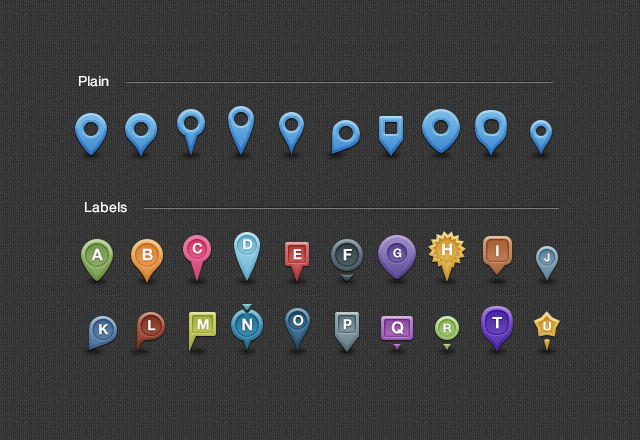
<style>
.page{position:relative;width:640px;height:440px;background:#303030}
.page>*{position:absolute;margin:0}
.t1{font:14px "HelveticaNeue-Medium";color:#ffffff}
.t2{font:14px "HelveticaNeue-Bold";color:#ffffff}
.t3{font:16px "HelveticaNeue-Bold";color:#ffffff}
.t4{font:15px "HelveticaNeue-Bold";color:#ffffff}
.t5{font:12px "HelveticaNeue-Bold";color:#ffffff}
.t6{font:11px "HelveticaNeue-Bold";color:#ffffff}
</style>
<div class="page">
<p class="t1" style="left:79px;top:76px;width:30px;height:11px">Plain</p>
<p class="t1" style="left:85px;top:202px;width:42px;height:11px">Labels</p>
<p class="t2" style="left:192px;top:243px;width:10px;height:11px">C</p>
<p class="t2" style="left:243px;top:239px;width:10px;height:11px">D</p>
<p class="t3" style="left:442px;top:243px;width:10px;height:13px">H</p>
<p class="t4" style="left:496px;top:245px;width:3px;height:12px">I</p>
<p class="t3" style="left:91px;top:248px;width:12px;height:13px">A</p>
<p class="t3" style="left:142px;top:248px;width:11px;height:13px">B</p>
<p class="t2" style="left:293px;top:249px;width:9px;height:11px">E</p>
<p class="t3" style="left:343px;top:249px;width:9px;height:12px">F</p>
<p class="t5" style="left:393px;top:248px;width:9px;height:10px">G</p>
<p class="t6" style="left:544px;top:253px;width:6px;height:9px">J</p>
<p class="t3" style="left:242px;top:318px;width:10px;height:13px">N</p>
<p class="t2" style="left:293px;top:315px;width:11px;height:11px">O</p>
<p class="t3" style="left:492px;top:317px;width:10px;height:12px">T</p>
<p class="t2" style="left:99px;top:324px;width:10px;height:11px">K</p>
<p class="t2" style="left:148px;top:320px;width:8px;height:11px">L</p>
<p class="t2" style="left:197px;top:319px;width:12px;height:11px">M</p>
<p class="t2" style="left:343px;top:319px;width:9px;height:11px">P</p>
<p class="t3" style="left:391px;top:321px;width:13px;height:14px">Q</p>
<p class="t5" style="left:443px;top:323px;width:8px;height:10px">R</p>
<p class="t5" style="left:543px;top:321px;width:8px;height:10px">U</p>
</div>
